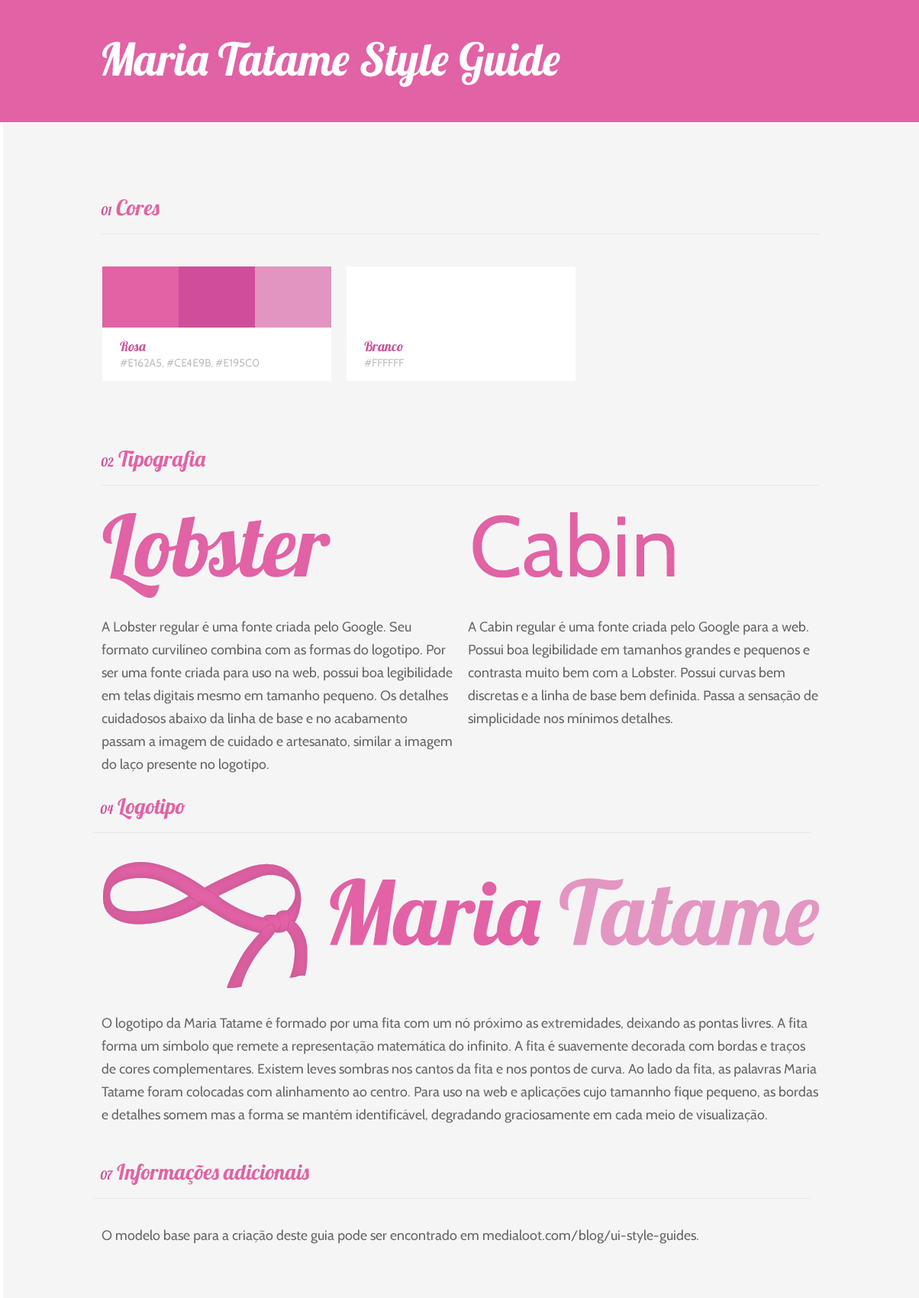
<style>
.page{position:relative;width:919px;height:1298px;background:#f5f5f5}
.page>*{position:absolute;margin:0}
.t1{font:45px "Lobster1.4";color:#fefefe}
.t2{font:21.4px "Lobster1.4";color:#e162a5}
.t3{font:12.2px "Lobster1.4";color:#ce4e9b}
.t4{font:10.7px/15.3px "Cabin-Regular";color:#bbbbbb}
.t5{font:13.7px "Lobster1.4";color:#ce4e9b}
.t6{font:85.6px "Lobster1.4";color:#e162a5}
.t7{font:85.6px "Cabin-Regular";color:#e162a5}
.t8{font:13.7px/22.9px "Cabin-Regular";color:#666666}
.t9{font:13.7px "Cabin-Regular";color:#666666}
</style>
<div class="page">
<p class="t1" style="left:102px;top:41px;width:458px;height:46px">Maria Tatame Style Guide</p>
<p class="t2" style="left:101px;top:199px;width:59px;height:17px"><span class="t3">01 </span>Cores</p>
<p class="t4" style="left:120px;top:340px;width:140px;height:28px"><span class="t5">Rosa<br></span>#E162A5, #CE4E9B, #E195C0</p>
<p class="t4" style="left:364px;top:340px;width:41px;height:27px"><span class="t5">Branco<br></span>#FFFFFF</p>
<p class="t2" style="left:101px;top:450px;width:105px;height:22px"><span class="t3">02 </span>Tipografia</p>
<p class="t6" style="left:102px;top:513px;width:228px;height:85px">Lobster</p>
<p class="t7" style="left:472px;top:511px;width:203px;height:67px">Cabin</p>
<p class="t8" style="left:102px;top:621px;width:351px;height:151px">A Lobster regular é uma fonte criada pelo Google. Seu formato curvilíneo combina com as formas do logotipo. Por ser uma fonte criada para uso na web, possui boa legibilidade em telas digitais mesmo em tamanho pequeno. Os detalhes cuidadosos abaixo da linha de base e no acabamento passam a imagem de cuidado e artesanato, similar a imagem do laço presente no logotipo.</p>
<p class="t8" style="left:468px;top:621px;width:350px;height:106px">A Cabin regular é uma fonte criada pelo Google para a web. Possui boa legibilidade em tamanhos grandes e pequenos e contrasta muito bem com a Lobster. Possui curvas bem discretas e a linha de base bem definida. Passa a sensação de simplicidade nos mínimos detalhes.</p>
<p class="t2" style="left:100px;top:798px;width:86px;height:21px"><span class="t3">04 </span>Logotipo</p>
<p class="t8" style="left:102px;top:1017px;width:716px;height:106px">O logotipo da Maria Tatame é formado por uma fita com um nó próximo as extremidades, deixando as pontas livres. A fita forma um símbolo que remete a representação matemática do infinito. A fita é suavemente decorada com bordas e traços de cores complementares. Existem leves sombras nos cantos da fita e nos pontos de curva. Ao lado da fita, as palavras Maria Tatame foram colocadas com alinhamento ao centro. Para uso na web e aplicações cujo tamannho fique pequeno, as bordas e detalhes somem mas a forma se mantém identificável, degradando graciosamente em cada meio de visualização.</p>
<p class="t2" style="left:100px;top:1163px;width:209px;height:22px"><span class="t3">07 </span>Informações adicionais</p>
<p class="t9" style="left:102px;top:1229px;width:596px;height:14px">O modelo base para a criação deste guia pode ser encontrado em medialoot.com/blog/ui-style-guides.</p>
</div>
